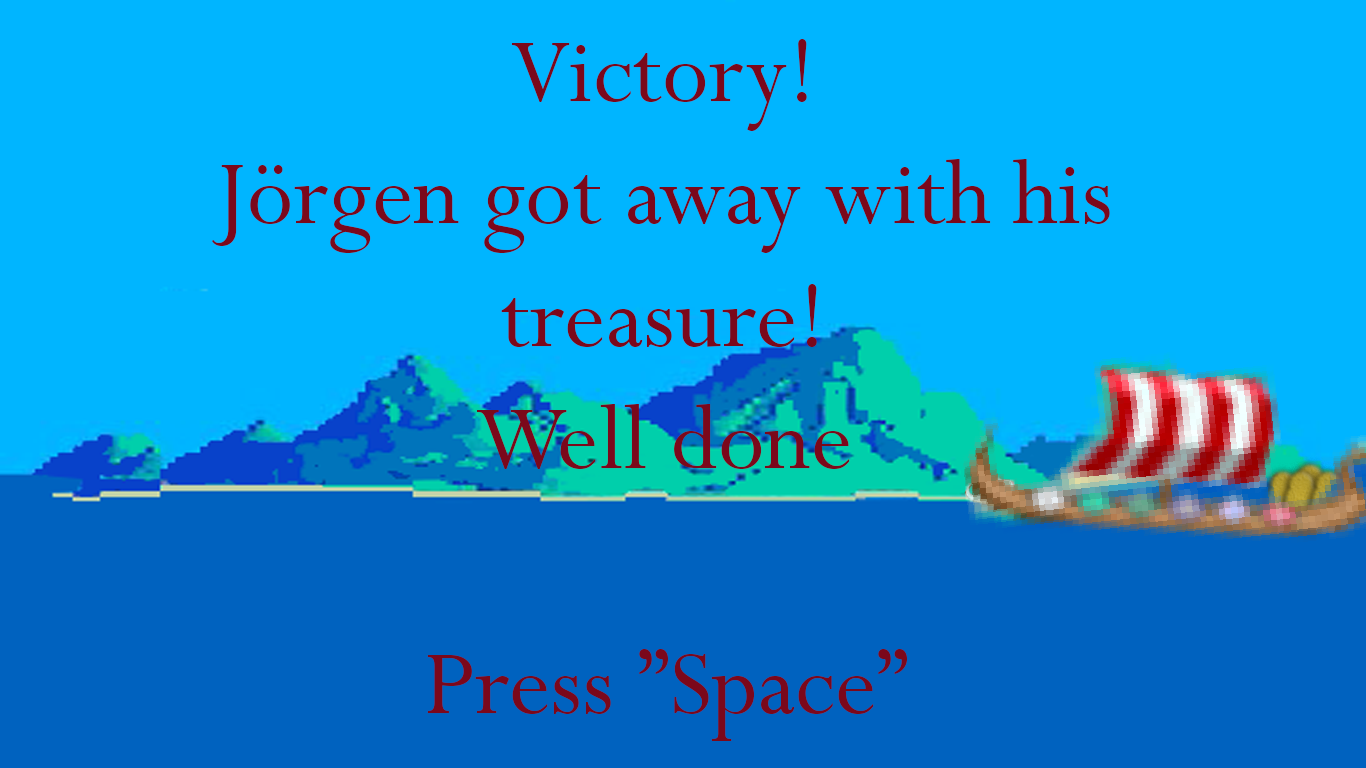
<style>
.page{position:relative;width:1366px;height:768px;background:#00b5ff}
.page>*{position:absolute;margin:0}
.t1{font:102px "Perpetua";color:#7b081b}
</style>
<div class="page">
<p class="t1" style="left:211px;top:39px;width:899px;height:702px;text-align:center">Victory!<br>Jörgen got away with his treasure!<br>Well done<br><br>Press ”Space”</p>
</div>
